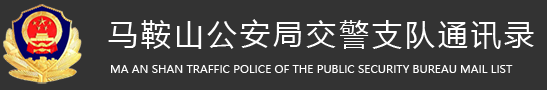
<style>
.page{position:relative;width:547px;height:90px;background:#333333}
.page>*{position:absolute;margin:0}
.t1{font:30px "MicrosoftYaHei";letter-spacing:0.1em;color:#ffffff}
.t2{font:11px "MicrosoftYaHei";color:#ffffff;text-transform:uppercase}
</style>
<div class="page">
<p class="t1" style="left:108px;top:19px;width:426px;height:30px">马鞍山公安局交警支队通讯录</p>
<p class="t2" style="left:111px;top:65px;width:402px;height:8px">MA AN SHAN Traffic police of the Public Security Bureau Mail list</p>
</div>
